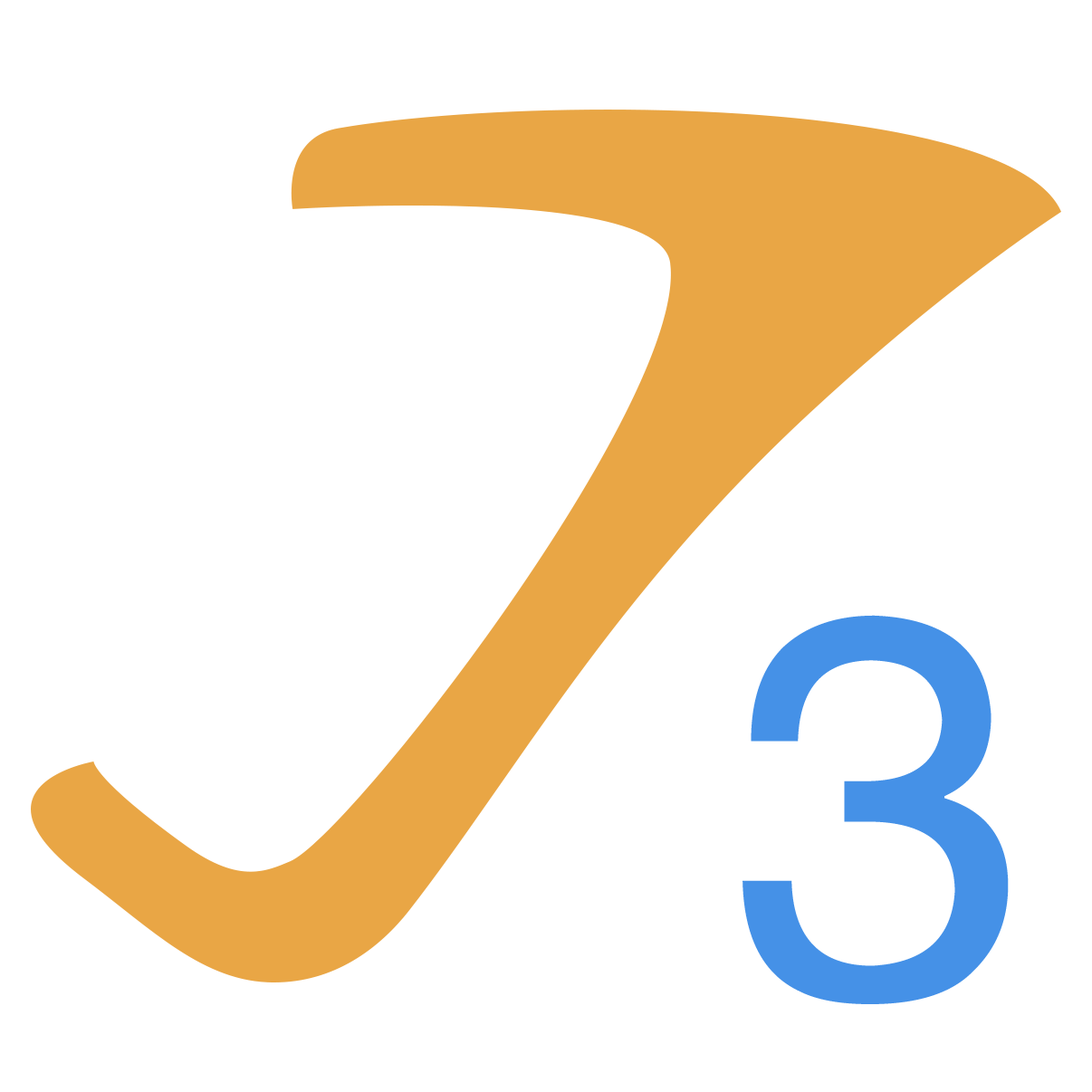
<style>
.page{position:relative;width:1092px;height:1092px;background:#ffffff}
.page>*{position:absolute;margin:0}
.t1{font:543.3px "GSZL--HSJHDT-0";color:#4591e7}
</style>
<div class="page">
<p class="t1" style="left:742px;top:615px;width:267px;height:389px">3</p>
</div>
